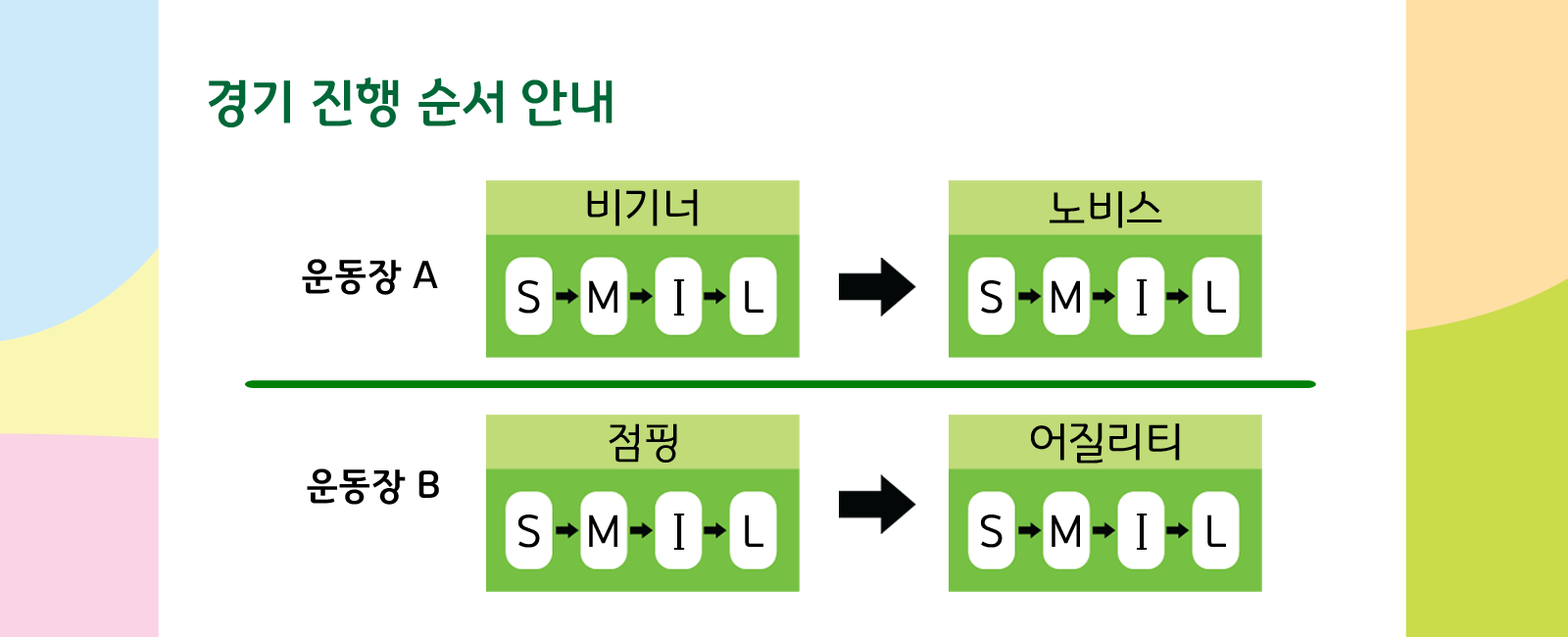
<style>
.page{position:relative;width:1568px;height:637px;background:#ffffff}
.page>*{position:absolute;margin:0}
.t1{font:53.1px "GyeonggiTitleM";color:#006838}
.t2{font:47px "GyeonggiTitleL";color:#000000}
.t3{font:38.8px "GyeonggiTitleM";color:#000000}
.t4{font:47px "GyeonggiTitleL";color:#000000;scale:0.95 1}
.t5{font:50.1px "LucidaFax";color:#000000;scale:0.79 1}
.t6{font:44.2px "GyeonggiTitleL";color:#000000}
</style>
<div class="page">
<p class="t1" style="left:208px;top:76px;width:404px;height:51px">경기 진행 순서 안내</p>
<p class="t2" style="left:587px;top:189px;width:111px;height:37px">비기너</p>
<p class="t2" style="left:1050px;top:191px;width:112px;height:37px">노비스</p>
<p class="t3" style="left:302px;top:259px;width:136px;height:36px">운동장 A</p>
<p class="t2" style="left:518px;top:280px;width:22px;height:34px">S</p>
<p class="t4" style="left:589px;top:280px;width:28px;height:33px">M</p>
<p class="t5" style="left:674px;top:279px;width:11px;height:37px">I</p>
<p class="t2" style="left:745px;top:280px;width:18px;height:33px">L</p>
<p class="t2" style="left:981px;top:280px;width:22px;height:34px">S</p>
<p class="t4" style="left:1052px;top:280px;width:28px;height:33px">M</p>
<p class="t5" style="left:1137px;top:279px;width:11px;height:37px">I</p>
<p class="t2" style="left:1207px;top:280px;width:19px;height:33px">L</p>
<p class="t6" style="left:609px;top:423px;width:68px;height:40px">점핑</p>
<p class="t2" style="left:1031px;top:422px;width:149px;height:42px">어질리티</p>
<p class="t3" style="left:307px;top:468px;width:132px;height:37px">운동장 B</p>
<p class="t2" style="left:518px;top:514px;width:22px;height:34px">S</p>
<p class="t4" style="left:589px;top:514px;width:28px;height:33px">M</p>
<p class="t5" style="left:674px;top:514px;width:11px;height:36px">I</p>
<p class="t2" style="left:745px;top:514px;width:18px;height:33px">L</p>
<p class="t2" style="left:981px;top:514px;width:22px;height:34px">S</p>
<p class="t4" style="left:1052px;top:514px;width:28px;height:33px">M</p>
<p class="t5" style="left:1137px;top:514px;width:11px;height:36px">I</p>
<p class="t2" style="left:1207px;top:514px;width:19px;height:33px">L</p>
</div>
